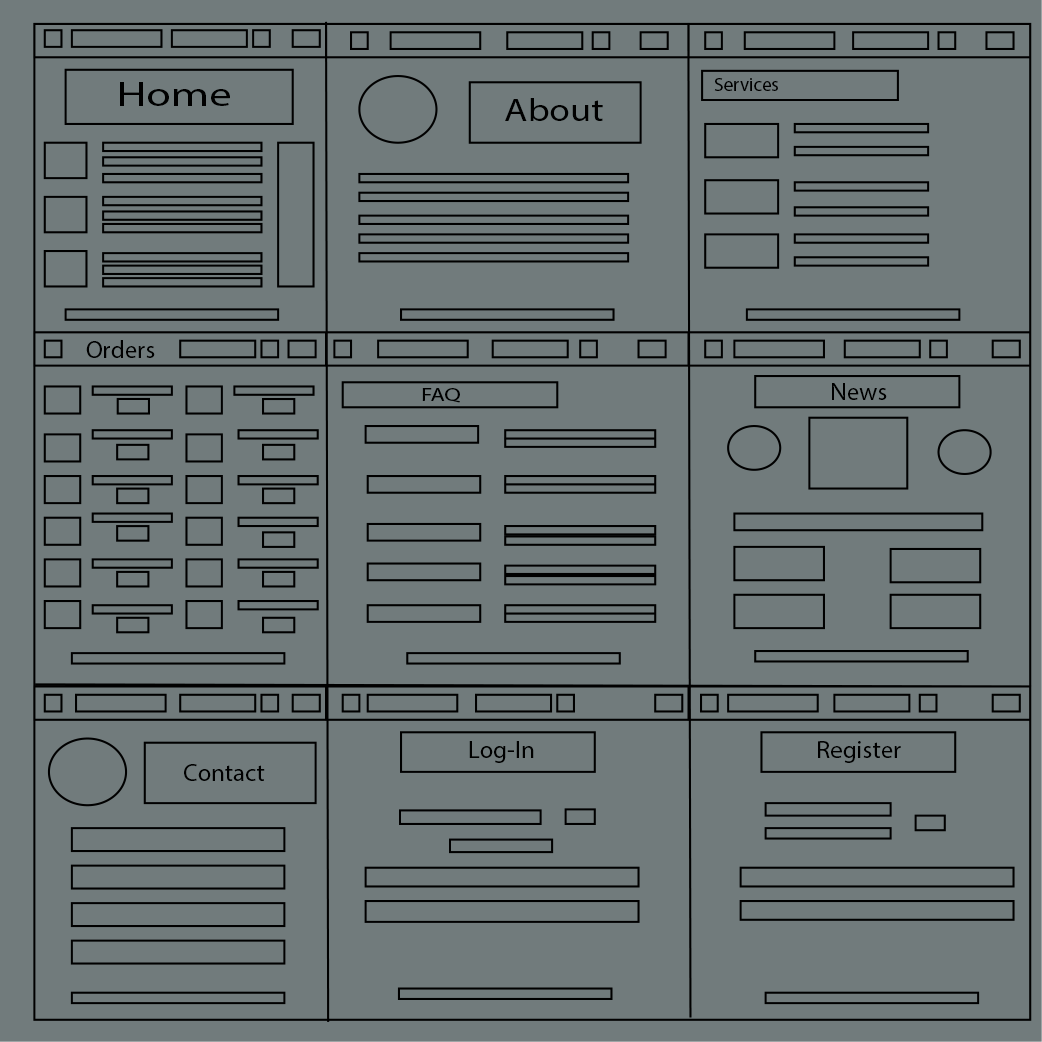
<style>
.page{position:relative;width:1042px;height:1042px;background:#717b7c}
.page>*{position:absolute;margin:0}
.t1{font:19.2px "MyriadPro-Regular";color:#000000}
.t2{font:34.5px "MyriadPro-Regular";color:#000000;scale:1.31 1}
.t3{font:32.6px "MyriadPro-Regular";color:#000000;scale:1.18 1}
.t4{font:25px "MyriadPro-Regular";color:#000000}
.t5{font:18.1px "MyriadPro-Regular";color:#000000;scale:1.28 1}
</style>
<div class="page">
<p class="t1" style="left:714px;top:78px;width:64px;height:13px">Services</p>
<p class="t2" style="left:120px;top:82px;width:110px;height:24px">Home</p>
<p class="t3" style="left:505px;top:98px;width:98px;height:23px">About</p>
<p class="t4" style="left:86px;top:340px;width:69px;height:18px">Orders</p>
<p class="t5" style="left:422px;top:388px;width:38px;height:15px">FAQ</p>
<p class="t4" style="left:832px;top:383px;width:55px;height:17px">News</p>
<p class="t4" style="left:469px;top:741px;width:65px;height:22px">Log-In</p>
<p class="t4" style="left:818px;top:741px;width:83px;height:22px">Register</p>
<p class="t4" style="left:184px;top:764px;width:81px;height:17px">Contact</p>
</div>
